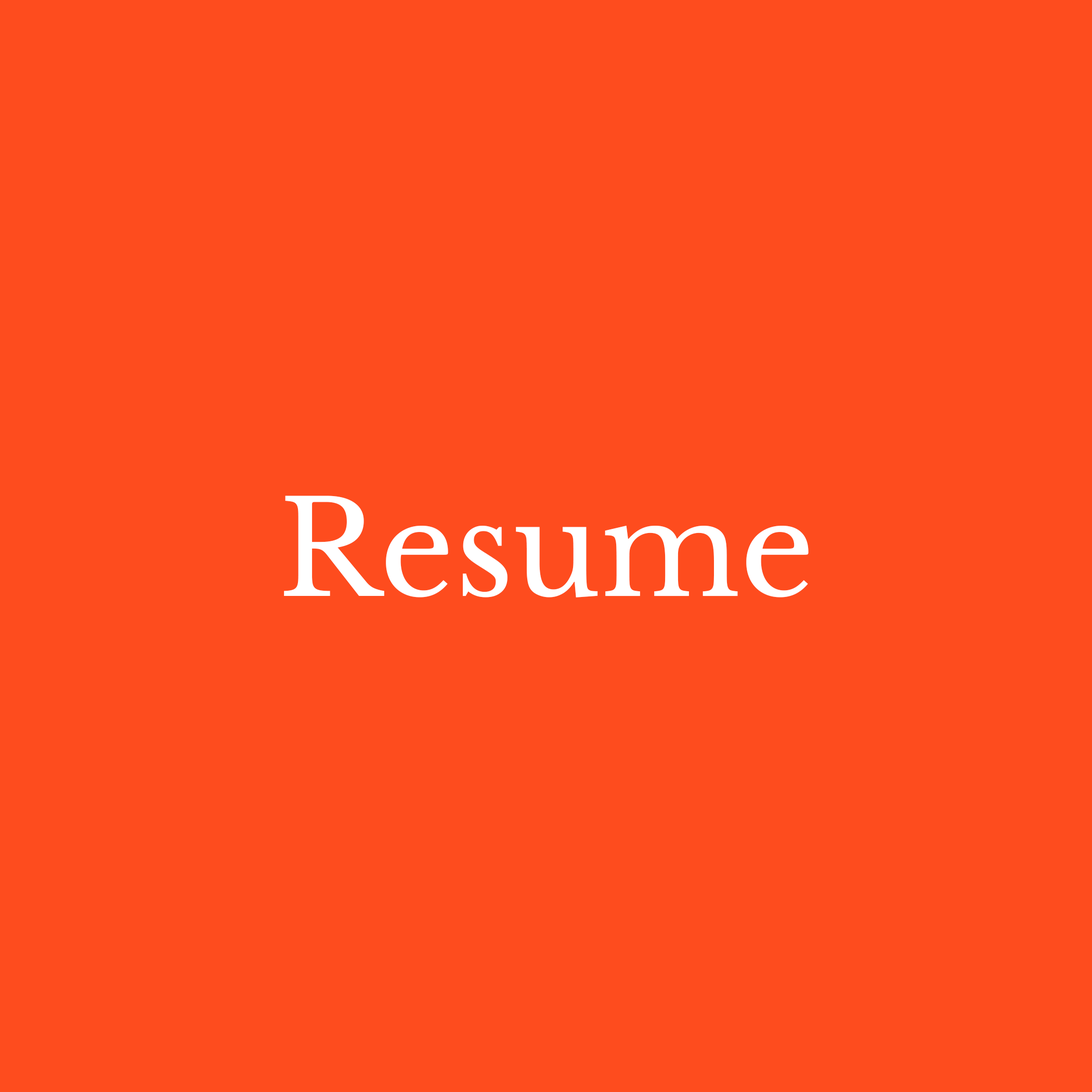
<style>
.page{position:relative;width:1092px;height:1092px;background:#fe4c1e}
.page>*{position:absolute;margin:0}
.t1{font:130px "LibreBaskerville-Regular";color:#ffffff}
</style>
<div class="page">
<p class="t1" style="left:284px;top:496px;width:525px;height:101px">Resume</p>
</div>
